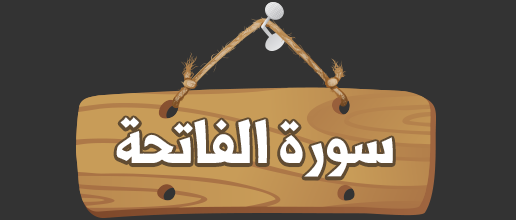
<style>
.page{position:relative;width:516px;height:220px;background:#333333}
.page>*{position:absolute;margin:0}
.t1{font:73.1px "Shorooq_N1";color:#ffffff}
</style>
<div class="page">
<p class="t1" style="left:116px;top:117px;width:277px;height:60px">سورة الفاتحة</p>
</div>
